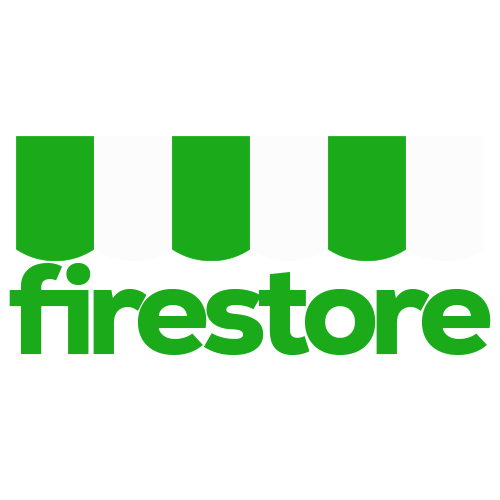
<style>
.page{position:relative;width:500px;height:500px;background:#ffffff}
.page>*{position:absolute;margin:0}
.t1{font:129.2px "Nexa-Heavy";letter-spacing:-0.075em;color:#1aaa1a}
</style>
<div class="page">
<p class="t1" style="left:9px;top:263px;width:482px;height:92px">firestore</p>
</div>
